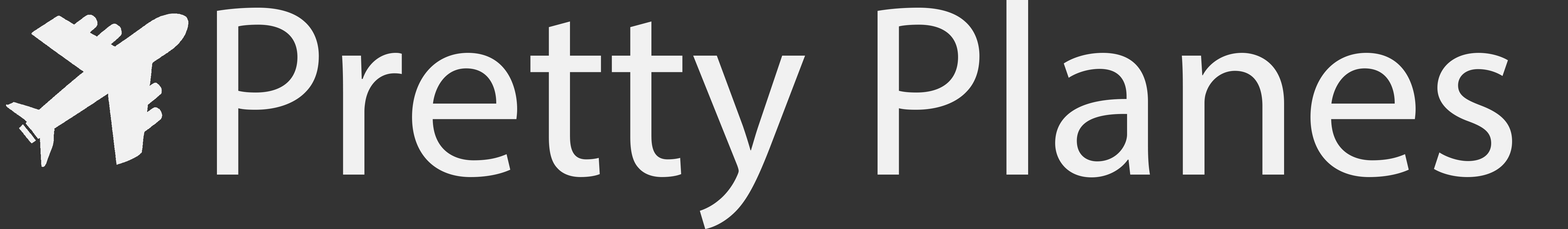
<style>
.page{position:relative;width:1568px;height:229px;background:#333333}
.page>*{position:absolute;margin:0}
.t1{font:245.8px "MyriadPro-Regular";color:#f1f1f1}
</style>
<div class="page">
<p class="t1" style="left:217px;top:0px;width:1295px;height:229px">Pretty Planes</p>
</div>
